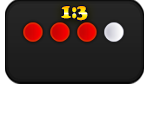
<style>
.page{position:relative;width:149px;height:120px;background:#ffffff}
.page>*{position:absolute;margin:0}
.t1{font:21.6px "UTM-Cooper-Black";scale:0.83 1}
</style>
<div class="page">
<p class="t1" style="left:61px;top:6px;width:27px;height:15px">1:3</p>
</div>
